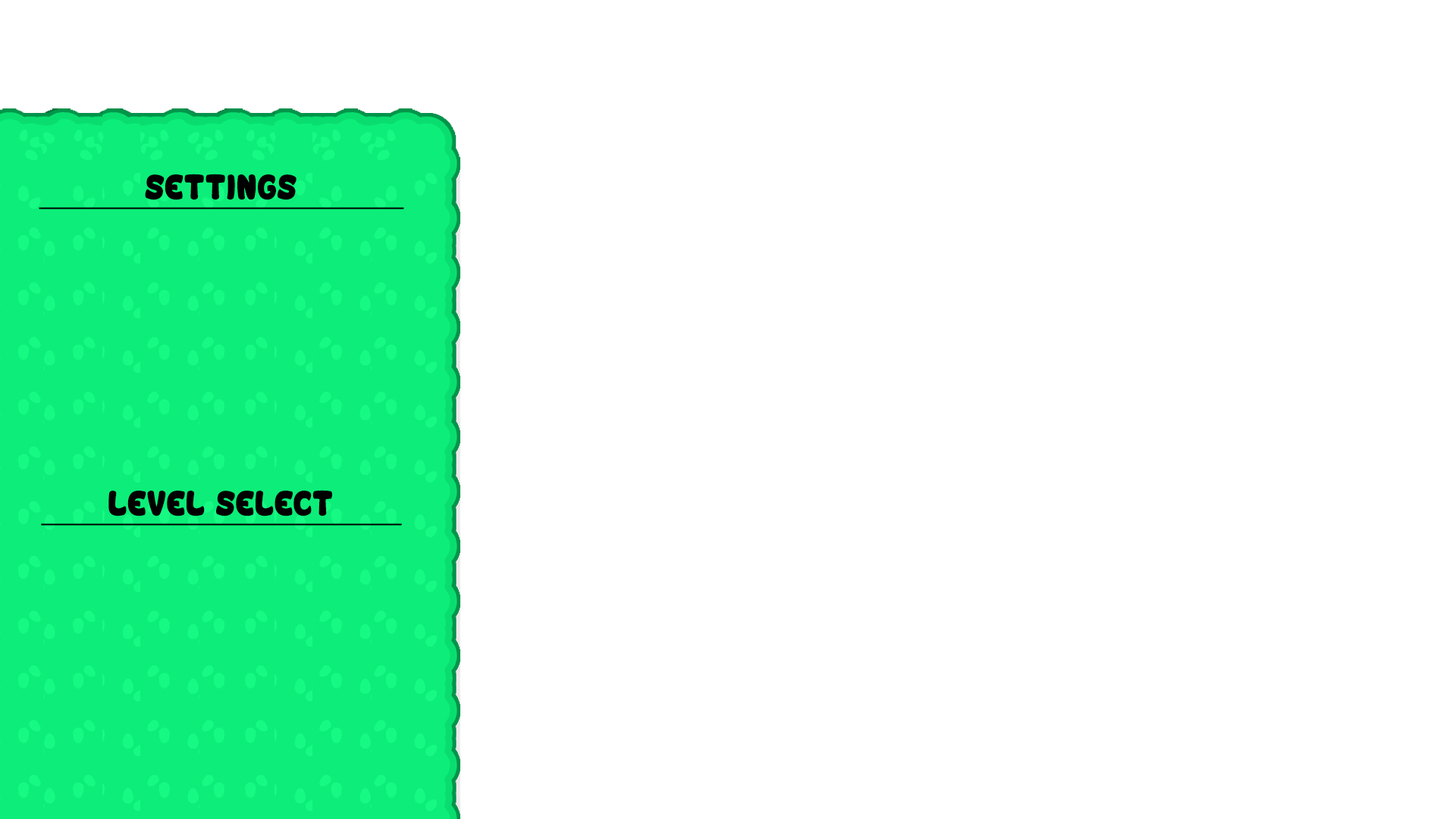
<style>
.page{position:relative;width:1456px;height:819px;background:#ffffff}
.page>*{position:absolute;margin:0}
.t1{font:36px "VinegarStroke";color:#000000;text-decoration:underline}
</style>
<div class="page">
<p class="t1" style="left:39px;top:174px;width:365px;height:35px">settings</p>
<p class="t1" style="left:41px;top:490px;width:361px;height:36px">level select</p>
</div>
